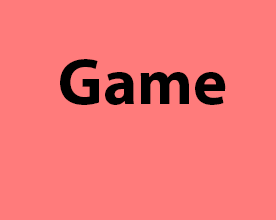
<style>
.page{position:relative;width:276px;height:220px;background:#ff7b7b}
.page>*{position:absolute;margin:0}
.t1{font:65px "MyriadPro-Bold";color:#000000}
</style>
<div class="page">
<p class="t1" style="left:60px;top:59px;width:166px;height:46px">Game</p>
</div>
